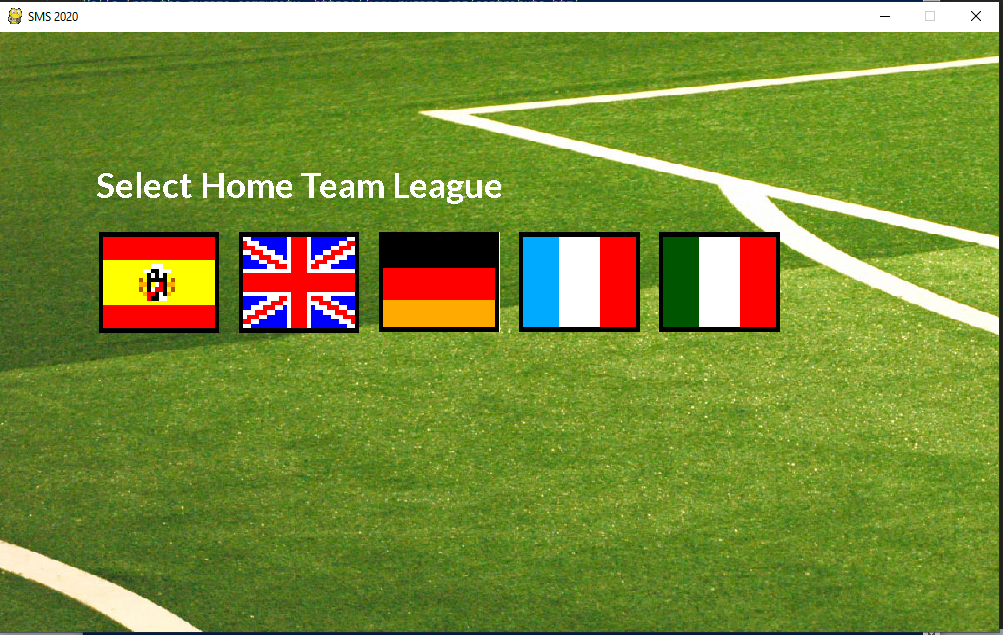
<style>
.page{position:relative;width:1003px;height:635px}
.page>*{position:absolute;margin:0}
.t1{font:35px "Lato-Bold";color:#ffffff}
</style>
<div class="page">
<p class="t1" style="left:97px;top:172px;width:404px;height:32px">Select Home Team League</p>
</div>
